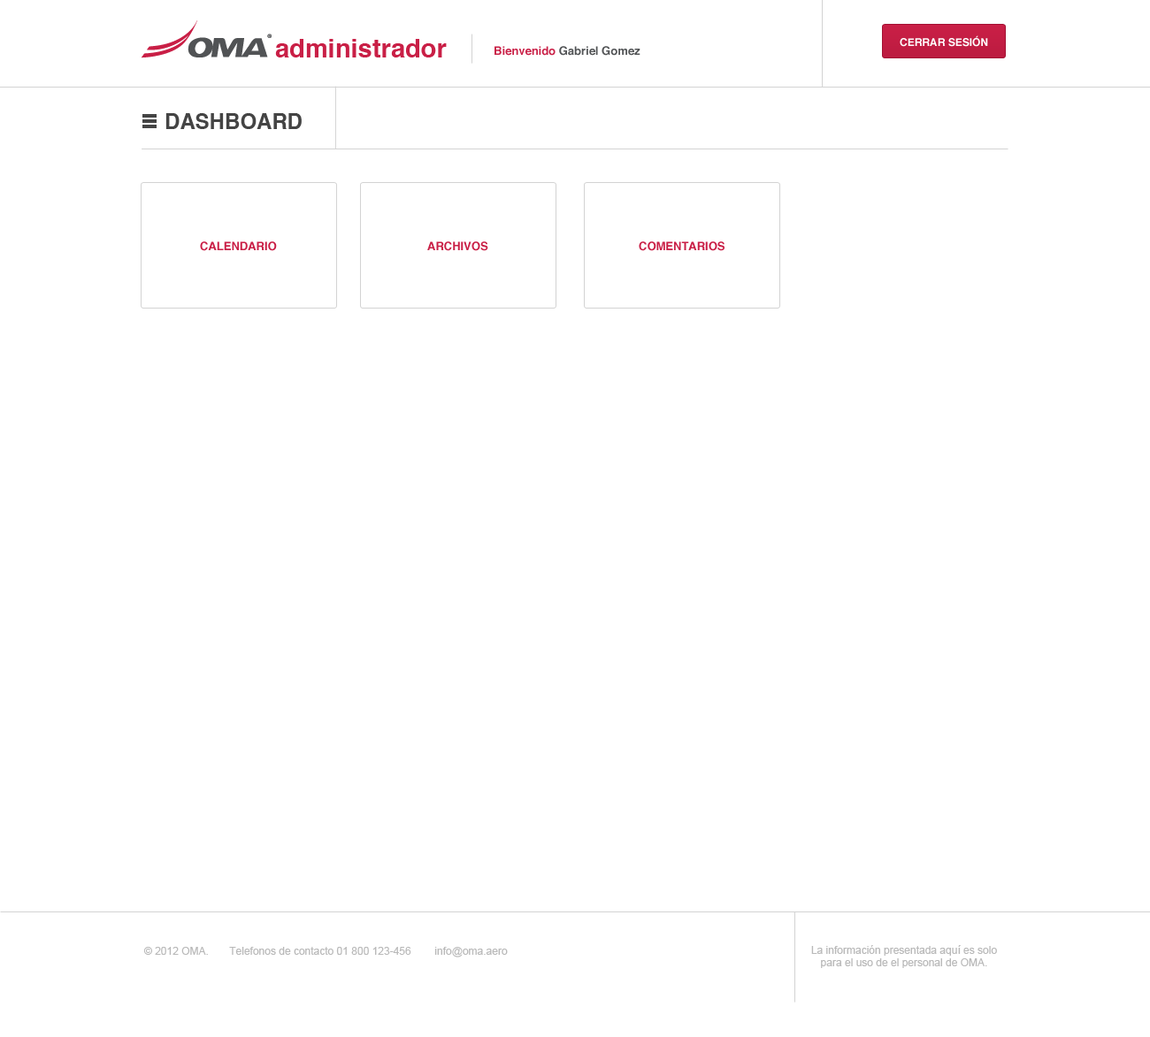
<style>
.page{position:relative;width:1150px;height:1037px;background:#ffffff}
.page>*{position:absolute;margin:0}
.t1{font:25.7px "Helvetica-Bold";color:#c91f46}
.t2{font:10.6px "Helvetica-Bold";color:#ffffff;text-transform:uppercase}
.t3{font:11.5px "Helvetica-Bold";color:#515355}
.t4{font:11.5px "Helvetica-Bold";color:#c91f46}
.t5{font:21.2px "Helvetica-Bold";color:#444444;text-transform:uppercase}
.t6{font:11.5px "Helvetica-Bold";color:#c91f46;text-transform:uppercase}
.t7{font:10.6px "ArialMT";color:#b9b9b9}
</style>
<div class="page">
<p class="t1" style="left:275px;top:39px;width:172px;height:18px">administrador</p>
<p class="t2" style="left:899px;top:35px;width:89px;height:12px">CERRAR sesión</p>
<p class="t3" style="left:494px;top:46px;width:146px;height:10px"><span class="t4">Bienvenido </span>Gabriel Gomez</p>
<p class="t5" style="left:165px;top:113px;width:137px;height:16px">DASHBOARD</p>
<p class="t6" style="left:200px;top:241px;width:77px;height:10px">calendario</p>
<p class="t6" style="left:427px;top:241px;width:61px;height:10px">archivos</p>
<p class="t6" style="left:638px;top:241px;width:86px;height:10px">comentarios</p>
<p class="t7" style="left:143px;top:947px;width:365px;height:11px">© 2012 OMA.       Telefonos de contacto 01 800 123-456        info@oma.aero</p>
<p class="t7" style="left:811px;top:945px;width:186px;height:23px;text-align:center">La información presentada aquí es solo<br>para el uso de el personal de OMA.</p>
</div>
